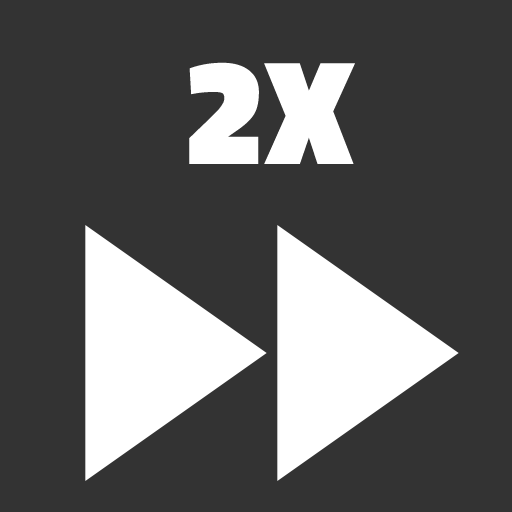
<style>
.page{position:relative;width:512px;height:512px;background:#333333}
.page>*{position:absolute;margin:0}
.t1{font:150px "TitilliumWeb-Black";color:#ffffff}
</style>
<div class="page">
<p class="t1" style="left:189px;top:62px;width:166px;height:102px">2X</p>
</div>
